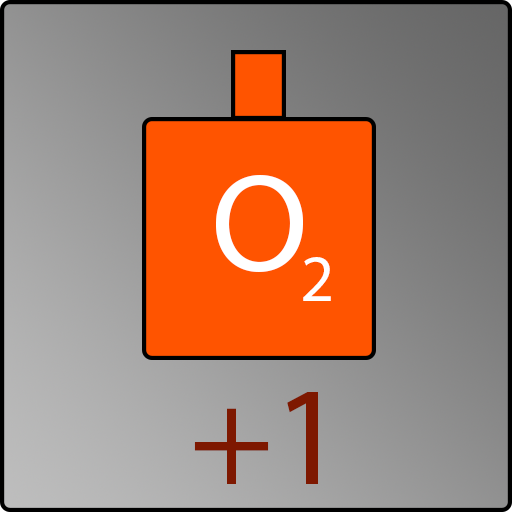
<style>
.page{position:relative;width:512px;height:512px}
.page>*{position:absolute;margin:0}
.t1{font:141.7px "MyriadPro-Regular";color:#ffffff}
.t2{font:66.7px "MyriadPro-Regular";color:#ffffff}
.t3{font:141.7px "MyriadPro-Regular";color:#7e1800}
</style>
<div class="page">
<p class="t1" style="left:216px;top:175px;width:87px;height:97px">O</p>
<p class="t2" style="left:303px;top:257px;width:28px;height:44px">2</p>
<p class="t3" style="left:194px;top:392px;width:124px;height:92px">+1</p>
</div>
